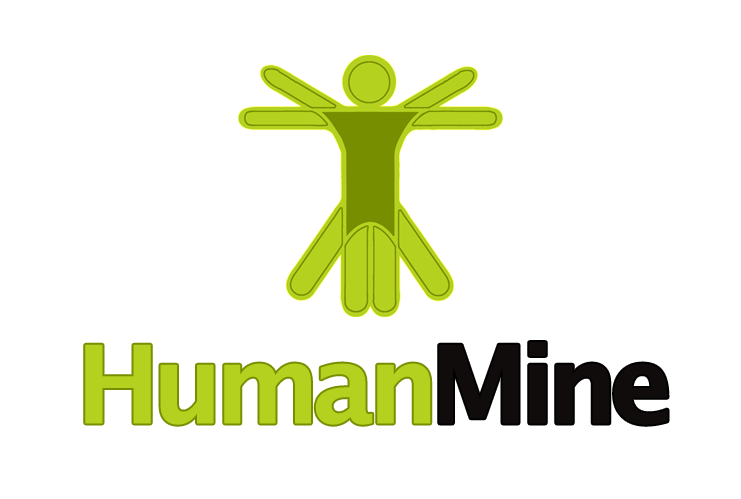
<style>
.page{position:relative;width:741px;height:499px;background:#ffffff}
.page>*{position:absolute;margin:0}
.t1{font:107.8px "LucidaGrande-Bold";letter-spacing:-0.1em;color:#100c0c;font-weight:bold}
.t2{font:107.8px "LucidaGrande-Bold";letter-spacing:-0.1em;color:#b4d11f;font-weight:bold}
</style>
<div class="page">
<p class="t1" style="left:439px;top:342px;width:229px;height:83px">Mine</p>
<p class="t2" style="left:85px;top:344px;width:346px;height:81px">Human</p>
</div>
